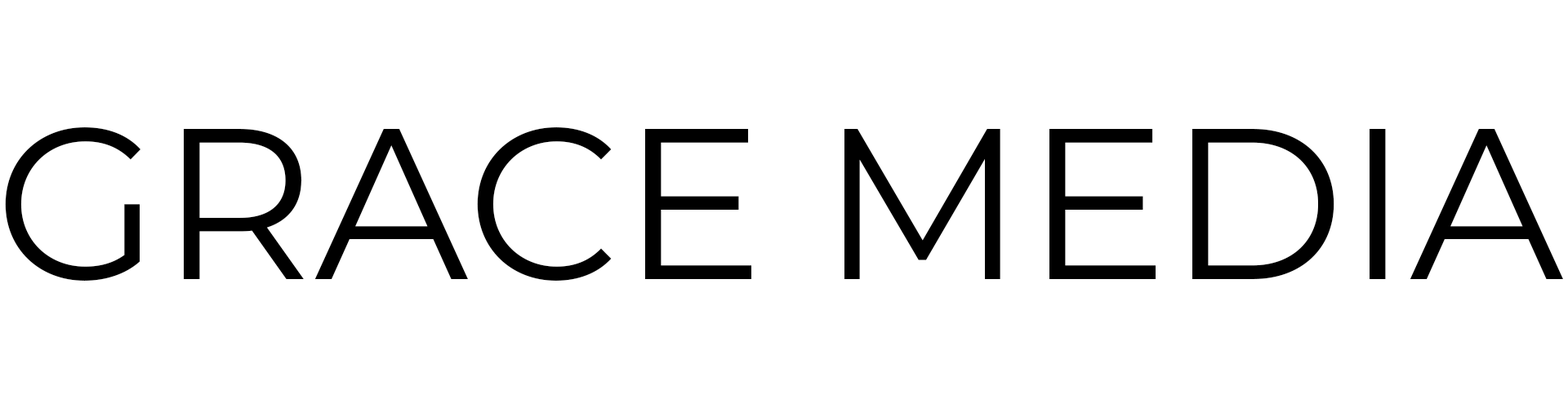
<style>
.page{position:relative;width:1568px;height:408px;background:#ffffff}
.page>*{position:absolute;margin:0}
.t1{font:214.4px "Montserrat-Regular";color:#000000}
</style>
<div class="page">
<p class="t1" style="left:5px;top:127px;width:1558px;height:154px">GRACE MEDIA</p>
</div>
